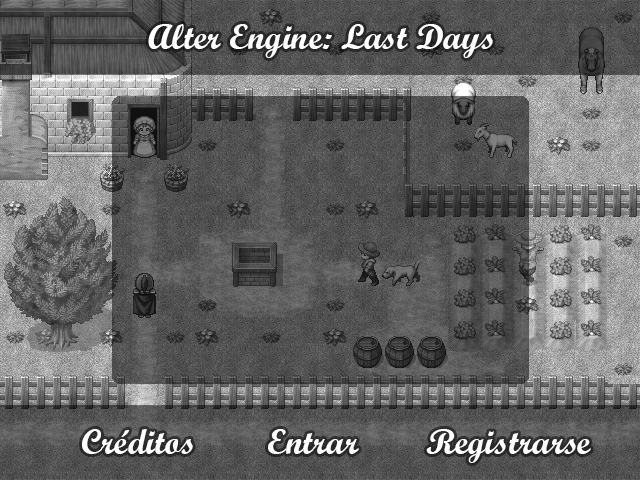
<style>
.page{position:relative;width:640px;height:480px}
.page>*{position:absolute;margin:0}
.t1{font:36px "ScriptMTBold";color:#ffffff}
</style>
<div class="page">
<p class="t1" style="left:148px;top:24px;width:345px;height:34px">Alter Engine: Last Days</p>
<p class="t1" style="left:82px;top:429px;width:111px;height:25px">Créditos</p>
<p class="t1" style="left:268px;top:429px;width:91px;height:25px">Entrar</p>
<p class="t1" style="left:426px;top:429px;width:165px;height:34px">Registrarse</p>
</div>
